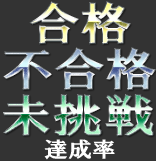
<style>
.page{position:relative;width:156px;height:161px;background:#333333}
.page>*{position:absolute;margin:0}
.t1{font:46.8px "HGSoeiPresenceEB";scale:1.11 1}
.t2{font:21.6px "HGSoeiPresenceEB";color:#ffffff;scale:1.11 1}
</style>
<div class="page">
<p class="t1" style="left:29px;top:1px;width:102px;height:44px">合格</p>
<p class="t1" style="left:3px;top:47px;width:153px;height:44px">不合格</p>
<p class="t1" style="left:3px;top:93px;width:151px;height:44px">未挑戦</p>
<p class="t2" style="left:44px;top:139px;width:71px;height:21px">達成率</p>
</div>
